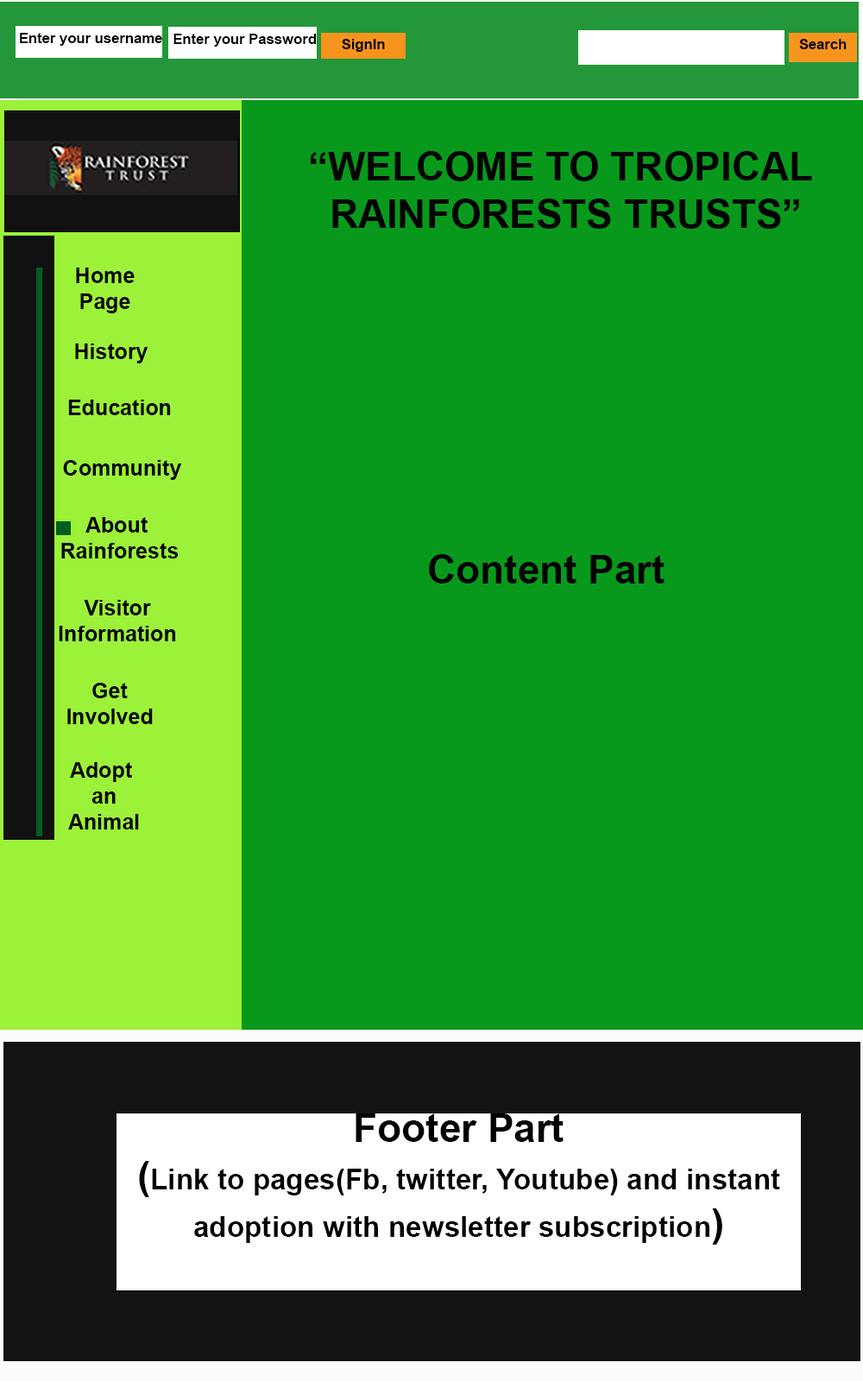
<style>
.page{position:relative;width:863px;height:1381px;background:#08991c}
.page>*{position:absolute;margin:0}
.t1{font:14.4px "Arial-BoldMT";color:#020202}
.t2{font:39.6px "Arial-BoldMT";color:#020202}
.t3{font:21.6px "Arial-BoldMT";color:#020202}
.t4{font:28.8px "Arial-BoldMT";color:#020202}
</style>
<div class="page">
<p class="t1" style="left:20px;top:33px;width:142px;height:13px">Enter your username</p>
<p class="t1" style="left:174px;top:34px;width:143px;height:13px">Enter your Password</p>
<p class="t1" style="left:342px;top:39px;width:43px;height:13px">SignIn</p>
<p class="t1" style="left:799px;top:39px;width:48px;height:10px">Search</p>
<p class="t2" style="left:311px;top:151px;width:501px;height:78px;text-align:center">“WELCOME TO TROPICAL <br>RAINFORESTS TRUSTS”</p>
<p class="t3" style="left:76px;top:268px;width:59px;height:45px;text-align:center">Home<br>Page</p>
<p class="t3" style="left:75px;top:344px;width:73px;height:19px">History</p>
<p class="t3" style="left:68px;top:400px;width:103px;height:15px">Education</p>
<p class="t3" style="left:63px;top:460px;width:119px;height:20px">Community</p>
<p class="t3" style="left:61px;top:517px;width:118px;height:42px;text-align:center">About <br>Rainforests</p>
<p class="t2" style="left:429px;top:554px;width:236px;height:30px">Content Part</p>
<p class="t3" style="left:59px;top:600px;width:117px;height:41px;text-align:center">Visitor<br>Information</p>
<p class="t3" style="left:67px;top:683px;width:86px;height:41px;text-align:center">Get<br>Involved</p>
<p class="t3" style="left:68px;top:762px;width:71px;height:68px;text-align:center">Adopt <br>an<br>Animal</p>
<p class="t4" style="left:139px;top:1114px;width:641px;height:131px;text-align:center"><span class="t2">Footer Part<br>(</span>Link to pages(Fb, twitter, Youtube) and instant <br>adoption with newsletter subscription<span class="t2">)</span></p>
</div>
